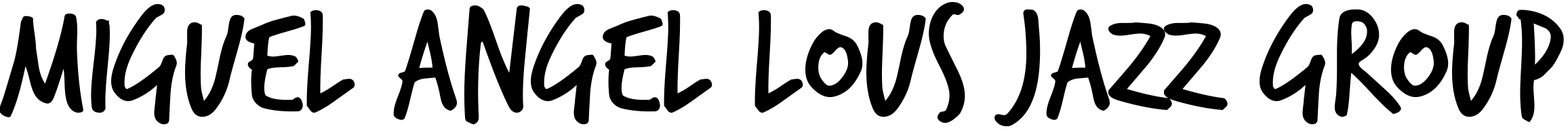
<style>
.page{position:relative;width:1568px;height:131px;background:#ffffff}
.page>*{position:absolute;margin:0}
.t1{font:159.9px "TrashHand";color:#000000}
</style>
<div class="page">
<p class="t1" style="left:0px;top:2px;width:1564px;height:124px">Miguel Angel Lous Jazz Group</p>
</div>
